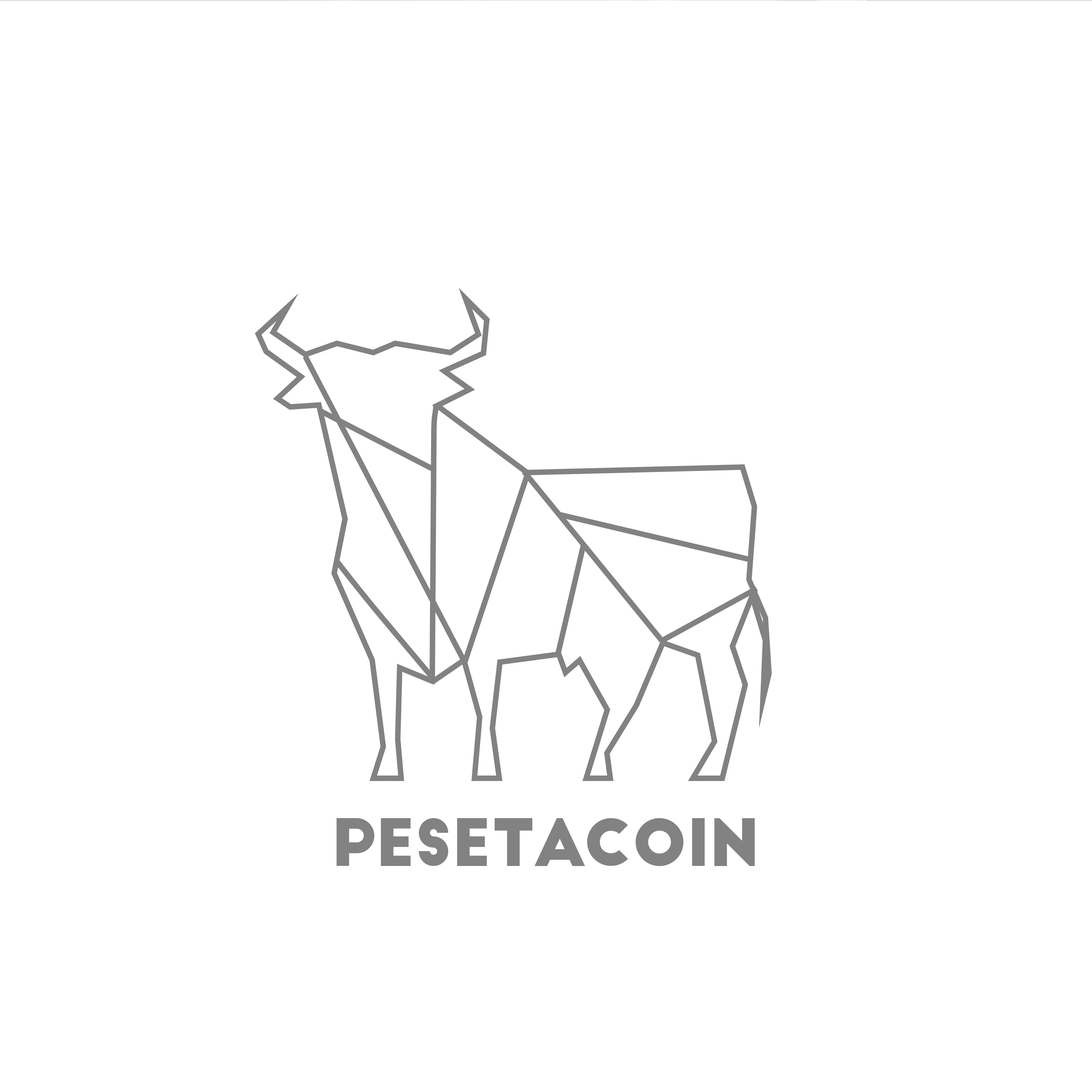
<style>
.page{position:relative;width:1092px;height:1092px;background:#ffffff}
.page>*{position:absolute;margin:0}
.t1{font:63.7px "BigJohn";color:#828282}
</style>
<div class="page">
<p class="t1" style="left:337px;top:818px;width:418px;height:48px">PESETACOIN</p>
</div>
